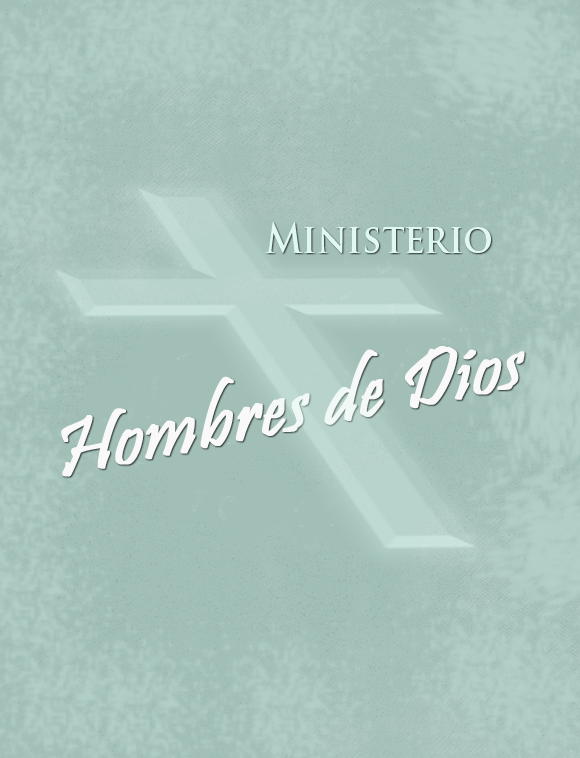
<style>
.page{position:relative;width:580px;height:758px}
.page>*{position:absolute;margin:0}
.t1{font:40px "TrajanPro-Bold";color:#dff8f1;scale:0.9 1}
.t2{font:80px "Pristina-Regular";color:#f9f9f9;font-weight:bold}
</style>
<div class="page">
<p class="t1" style="left:265px;top:222px;width:226px;height:31px">Ministerio</p>
<p class="t2" style="left:61px;top:346px;width:464px;height:131px;rotate:-11deg">Hombres de Dios</p>
</div>
